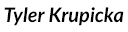
<style>
.page{position:relative;width:128px;height:32px;background:#ffffff}
.page>*{position:absolute;margin:0}
.t1{font:20px "Lato-BoldItalic";color:#000000}
</style>
<div class="page">
<p class="t1" style="left:4px;top:7px;width:120px;height:19px">Tyler Krupicka</p>
</div>
